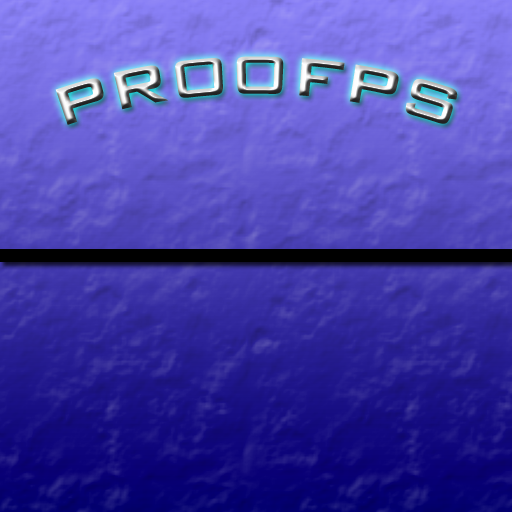
<style>
.page{position:relative;width:512px;height:512px}
.page>*{position:absolute;margin:0}
.t1{font:72px "BankGothicBT-Medium"}
</style>
<div class="page">
<p class="t1" style="left:55px;top:56px;width:403px;height:69px">PR00FPS</p>
</div>
